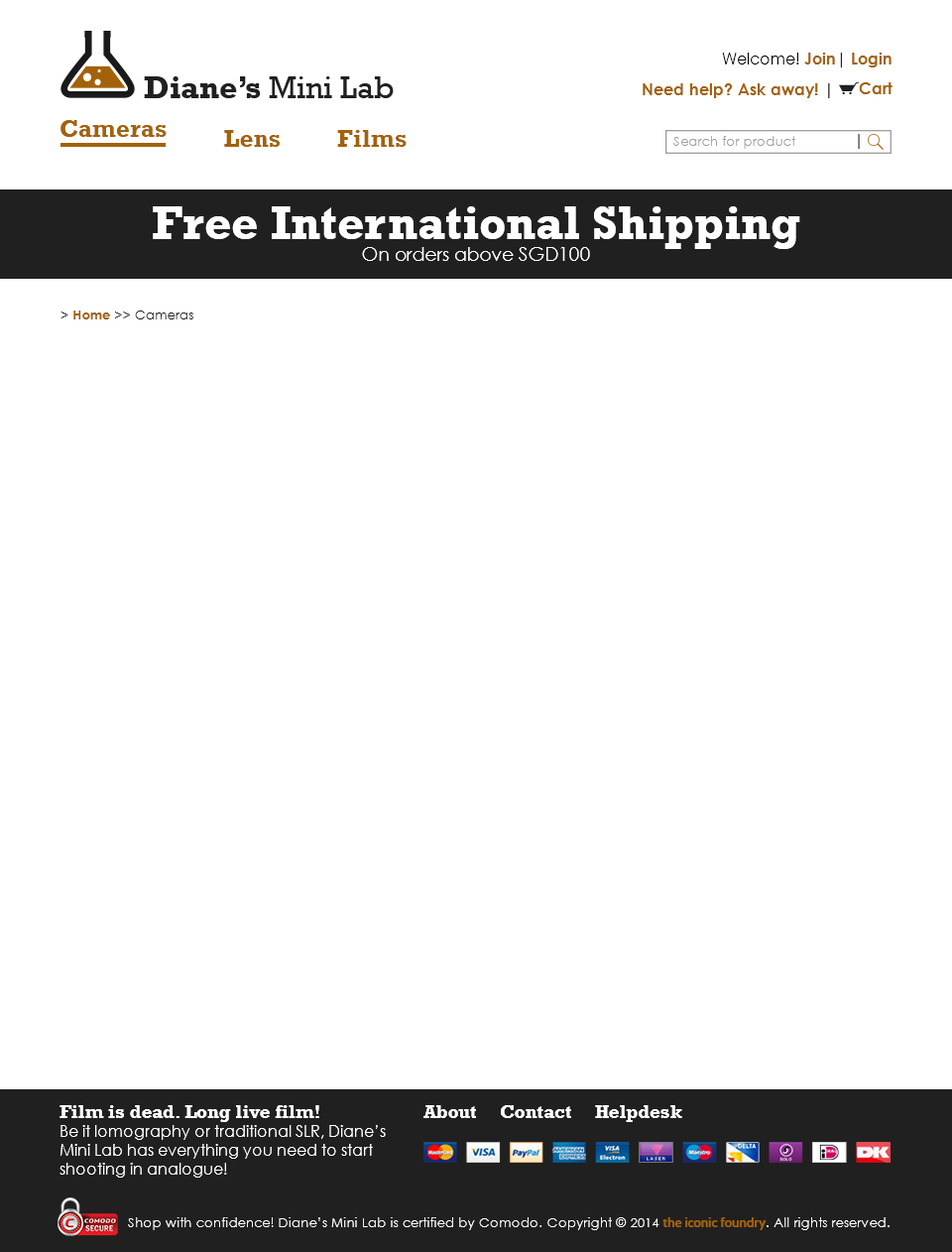
<style>
.page{position:relative;width:952px;height:1252px;background:#ffffff}
.page>*{position:absolute;margin:0}
.t1{font:15.9px "CenturyGothic";color:#000000}
.t2{font:15.9px "CenturyGothic-Bold";color:#a3620a}
.t3{font:15.9px "CenturyGothic";color:#202020}
.t4{font:31.7px "Rockwell";color:#202020}
.t5{font:31.7px "Rockwell-Bold";color:#202020}
.t6{font:11.9px "CenturyGothic-Bold";color:#a3620a}
.t7{font:11.9px "CenturyGothic-Bold";color:#202020}
.t8{font:23.8px "Rockwell-Bold";color:#a3620a}
.t9{font:13.2px "CenturyGothic";color:#9f9f9f}
.t10{font:15.9px "CenturyGothic"}
.t11{font:47.6px "Rockwell-Bold";color:#ffffff}
.t12{font:18.5px "CenturyGothic";color:#ffffff}
.t13{font:13.2px "CenturyGothic";color:#202020}
.t14{font:13.2px "CenturyGothic-Bold";color:#a3620a}
.t15{font:15.9px "CenturyGothic";color:#ffffff}
.t16{font:18.5px "Rockwell-Bold";color:#ffffff}
.t17{font:13.2px "CenturyGothic";color:#ffffff}
.t18{font:13.2px "Cabin-SemiBold";color:#a3620a}
</style>
<div class="page">
<p class="t1" style="left:722px;top:53px;width:170px;height:14px">Welcome! <span class="t2">Join</span><span class="t3">| </span><span class="t2">Login</span></p>
<p class="t4" style="left:144px;top:76px;width:250px;height:22px"><span class="t5">Diane’s </span>Mini Lab</p>
<p class="t6" style="left:643px;top:83px;width:187px;height:15px">Need help? Ask away! <span class="t7">|</span></p>
<p class="t2" style="left:859px;top:82px;width:34px;height:12px">Cart</p>
<p class="t8" style="left:61px;top:120px;width:106px;height:17px">Cameras</p>
<p class="t8" style="left:224px;top:130px;width:56px;height:17px">Lens</p>
<p class="t8" style="left:337px;top:130px;width:70px;height:17px">Films</p>
<p class="t9" style="left:674px;top:136px;width:122px;height:13px">Search for product</p>
<p class="t10" style="left:858px;top:134px;width:2px;height:15px">|</p>
<p class="t11" style="left:153px;top:206px;width:648px;height:55px;text-align:center">Free International Shipping<br><span class="t12">On orders above SGD100</span></p>
<p class="t13" style="left:61px;top:311px;width:132px;height:8px">&gt; <span class="t14">Home</span> &gt;&gt; Cameras</p>
<p class="t15" style="left:60px;top:1105px;width:326px;height:73px"><span class="t16">Film is dead. Long live film!<br></span>Be it lomography or traditional SLR, Diane’s Mini Lab has everything you need to start shooting in analogue!</p>
<p class="t16" style="left:424px;top:1105px;width:52px;height:13px">About</p>
<p class="t16" style="left:501px;top:1105px;width:70px;height:13px">Contact</p>
<p class="t16" style="left:595px;top:1105px;width:88px;height:17px">Helpdesk</p>
<p class="t17" style="left:128px;top:1217px;width:762px;height:13px">Shop with confidence! Diane’s Mini Lab is certified by Comodo. Copyright © 2014 <span class="t18">the iconic foundry</span>. All rights reserved.</p>
</div>
